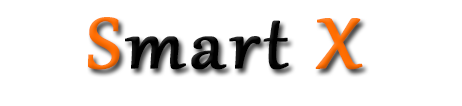
<style>
.page{position:relative;width:462px;height:106px;background:#ffffff}
.page>*{position:absolute;margin:0}
.t1{font:87.1px "Gabriola";letter-spacing:0.04em;color:#000000;font-weight:bold;scale:1.07 1}
.t2{font:87.1px "Gabriola";letter-spacing:0.04em;color:#ff6d02;font-weight:bold;scale:1.07 1}
</style>
<div class="page">
<p class="t1" style="left:88px;top:17px;width:275px;height:53px"><span class="t2">S</span>mart<span class="t2"> X</span></p>
</div>
